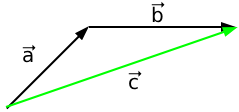
<style>
.page{position:relative;width:239px;height:112px;background:#ffffff}
.page>*{position:absolute;margin:0}
.t1{font:20px "DejaVuSans";color:#000000}
</style>
<div class="page">
<p class="t1" style="left:152px;top:6px;width:11px;height:17px">b</p>
<p class="t1" style="left:23px;top:50px;width:10px;height:13px">a</p>
<p class="t1" style="left:129px;top:77px;width:9px;height:13px">c</p>
</div>
